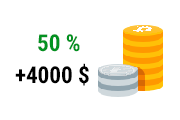
<style>
.page{position:relative;width:180px;height:120px;background:#ffffff}
.page>*{position:absolute;margin:0}
.t1{font:23.1px "RobotoCondensed-Bold";color:#039221}
.t2{font:23.1px "RobotoCondensed-Bold";color:#000000}
</style>
<div class="page">
<p class="t1" style="left:38px;top:34px;width:42px;height:18px">50 %</p>
<p class="t2" style="left:15px;top:63px;width:74px;height:23px">+4000 $</p>
</div>
